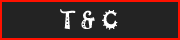
<style>
.page{position:relative;width:180px;height:40px;background:#232323}
.page>*{position:absolute;margin:0}
.t1{font:22px "Jokerman-Regular";color:#ffffff}
</style>
<div class="page">
<p class="t1" style="left:60px;top:9px;width:58px;height:21px">T &amp; C</p>
</div>
